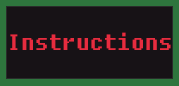
<style>
.page{position:relative;width:179px;height:86px;background:#171216}
.page>*{position:absolute;margin:0}
.t1{font:22px "Fixedsys";color:#e72c3f}
</style>
<div class="page">
<p class="t1" style="left:10px;top:32px;width:161px;height:18px">Instructions</p>
</div>
